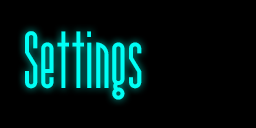
<style>
.page{position:relative;width:256px;height:128px;background:#000000}
.page>*{position:absolute;margin:0}
.t1{font:79.2px "Marapfhont";color:#00fff6}
</style>
<div class="page">
<p class="t1" style="left:25px;top:31px;width:117px;height:69px">Settings</p>
</div>
